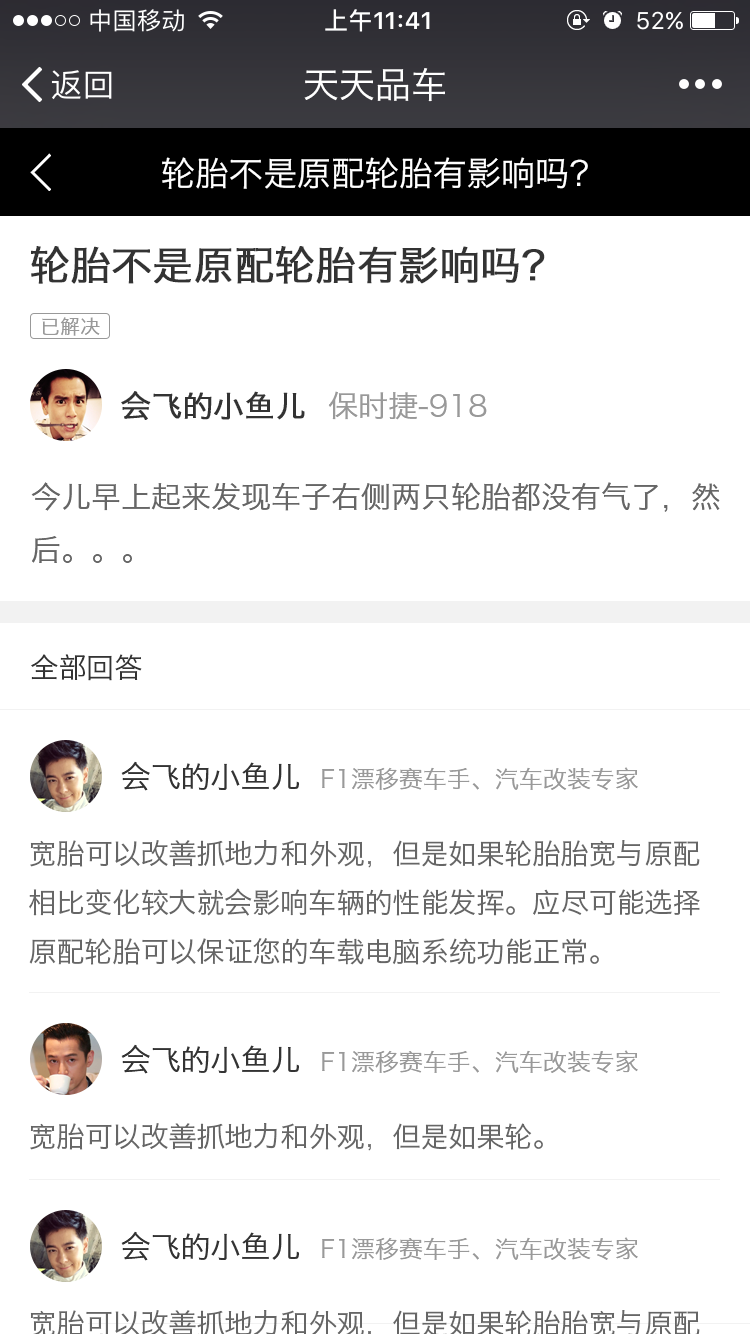
<style>
.page{position:relative;width:750px;height:1334px;background:#ffffff}
.page>*{position:absolute;margin:0}
.t1{font:36px "HiraginoSansGB-W3";color:#ffffff}
.t2{font:34px "HiraginoSansGB-W3";color:#ffffff}
.t3{font:40px "HiraginoSansGB-W3";color:#333333;text-transform:uppercase;font-weight:bold}
.t4{font:20px "HiraginoSansGB-W3";color:#999999}
.t5{font:30px "HiraginoSansGB-W3";color:#999999;text-transform:uppercase}
.t6{font:30px "HiraginoSansGB-W3";color:#333333;text-transform:uppercase;font-weight:bold}
.t7{font:30px "HiraginoSansGB-W3";color:#666666;text-transform:uppercase}
.t8{font:28px "HiraginoSansGB-W3";color:#333333}
.t9{font:24px "HiraginoSansGB-W3";color:#999999;text-transform:uppercase}
.t10{font:30px "HiraginoSansGB-W3";color:#333333;text-transform:uppercase}
.t11{font:28px "HiraginoSansGB-W3";color:#666666;text-transform:uppercase}
</style>
<div class="page">
<p class="t1" style="left:304px;top:68px;width:141px;height:34px">天天品车</p>
<p class="t2" style="left:162px;top:157px;width:426px;height:32px">轮胎不是原配轮胎有影响吗？</p>
<p class="t3" style="left:31px;top:246px;width:514px;height:38px">轮胎不是原配轮胎有影响吗？</p>
<p class="t4" style="left:42px;top:317px;width:58px;height:19px">已解决</p>
<p class="t5" style="left:121px;top:391px;width:366px;height:29px"><span class="t6">会飞的小鱼儿  </span>保时捷-918</p>
<p class="t7" style="left:31px;top:482px;width:689px;height:81px">今儿早上起来发现车子右侧两只轮胎都没有气了，然后。。。</p>
<p class="t8" style="left:31px;top:654px;width:111px;height:27px">全部回答</p>
<p class="t9" style="left:121px;top:761px;width:517px;height:30px"><span class="t10">会飞的小鱼儿  </span>F1漂移赛车手、汽车改装专家</p>
<p class="t11" style="left:29px;top:840px;width:671px;height:125px">宽胎可以改善抓地力和外观，但是如果轮胎胎宽与原配相比变化较大就会影响车辆的性能发挥。应尽可能选择原配轮胎可以保证您的车载电脑系统功能正常。</p>
<p class="t9" style="left:121px;top:1044px;width:517px;height:30px"><span class="t10">会飞的小鱼儿  </span>F1漂移赛车手、汽车改装专家</p>
<p class="t11" style="left:30px;top:1123px;width:513px;height:28px">宽胎可以改善抓地力和外观，但是如果轮。</p>
<p class="t9" style="left:121px;top:1231px;width:517px;height:30px"><span class="t10">会飞的小鱼儿  </span>F1漂移赛车手、汽车改装专家</p>
</div>
